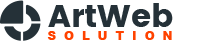
<style>
.page{position:relative;width:220px;height:41px;background:#ffffff}
.page>*{position:absolute;margin:0}
.t1{font:32px "Poppins";color:#253138}
.t2{font:12px "Arial-Black";letter-spacing:0.66em;color:#ff4200}
</style>
<div class="page">
<p class="t1" style="left:48px;top:3px;width:125px;height:24px">ArtWeb</p>
<p class="t2" style="left:47px;top:31px;width:125px;height:9px">SOLUTION</p>
</div>
